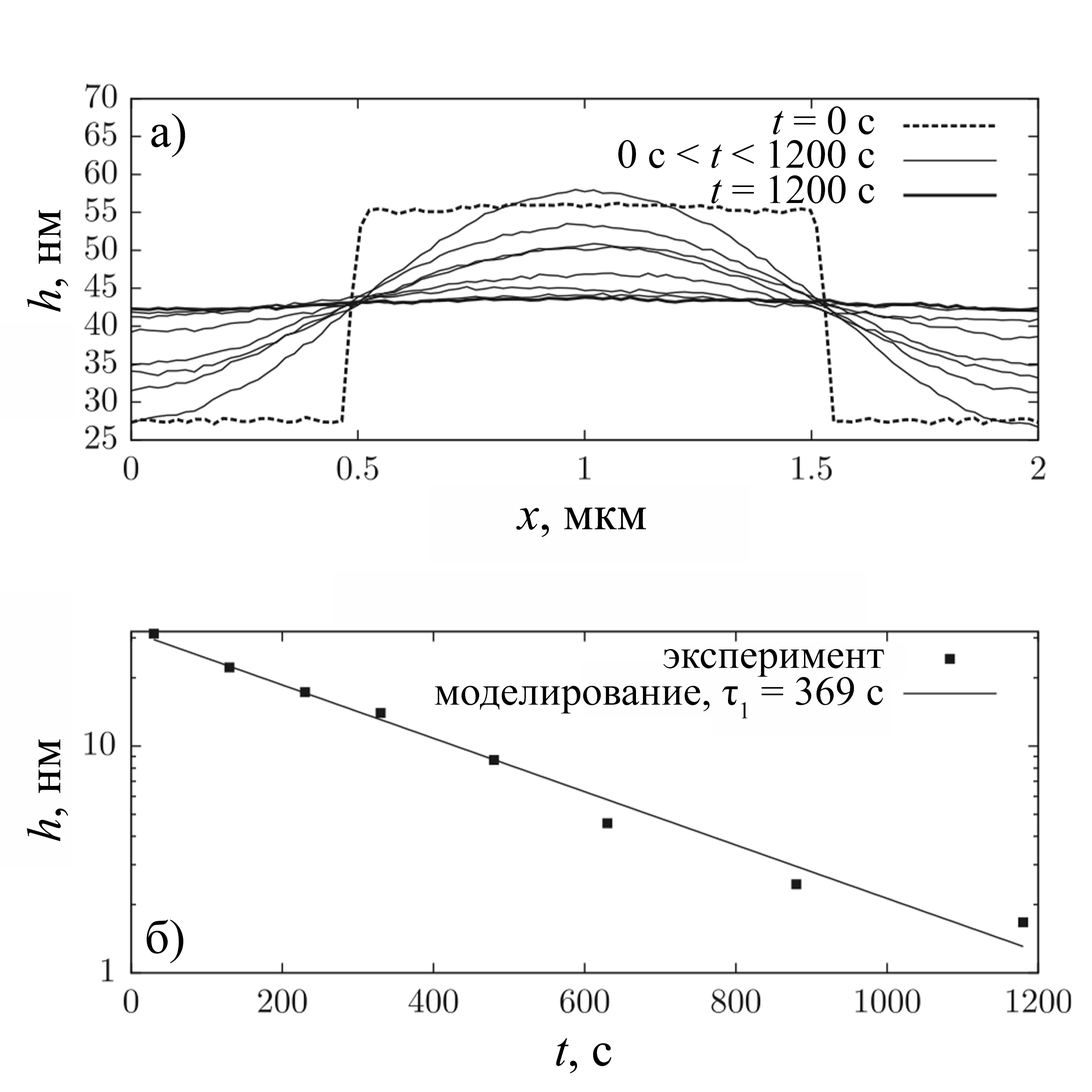
<style>
.page{position:relative;width:1092px;height:1092px;background:#ffffff}
.page>*{position:absolute;margin:0}
.t1{font:47.9px "TimesNewRomanPSMT";color:#000000}
.t2{font:41.1px "TimesNewRomanPSMT";color:#000000}
.t3{font:41.1px "TimesNewRomanPS-ItalicMT";color:#000000}
.t4{font:47.9px "TimesNewRomanPS-ItalicMT";color:#000000}
</style>
<div class="page">
<p class="t1" style="left:151px;top:113px;width:34px;height:44px">а)</p>
<p class="t2" style="left:773px;top:106px;width:101px;height:29px"><span class="t3">t</span> = 0 c</p>
<p class="t2" style="left:618px;top:140px;width:256px;height:28px">0 c &lt; <span class="t3">t</span> &lt; 1200 c</p>
<p class="t2" style="left:711px;top:175px;width:163px;height:29px"><span class="t3">t</span> = 1200 с</p>
<p class="t1" style="left:27px;top:210px;width:41px;height:102px;rotate:-90deg"><span class="t4">h</span>, нм</p>
<p class="t1" style="left:516px;top:507px;width:130px;height:30px"><span class="t4">x</span>, мкм</p>
<p class="t2" style="left:663px;top:649px;width:222px;height:28px">эксперимент</p>
<p class="t2" style="left:435px;top:677px;width:448px;height:42px">моделирование, τ1 = 369 с</p>
<p class="t1" style="left:27px;top:739px;width:41px;height:102px;rotate:-90deg"><span class="t4">h</span>, нм</p>
<p class="t1" style="left:147px;top:919px;width:37px;height:44px">б)</p>
<p class="t1" style="left:556px;top:1038px;width:55px;height:35px"><span class="t4">t</span>, с</p>
</div>
